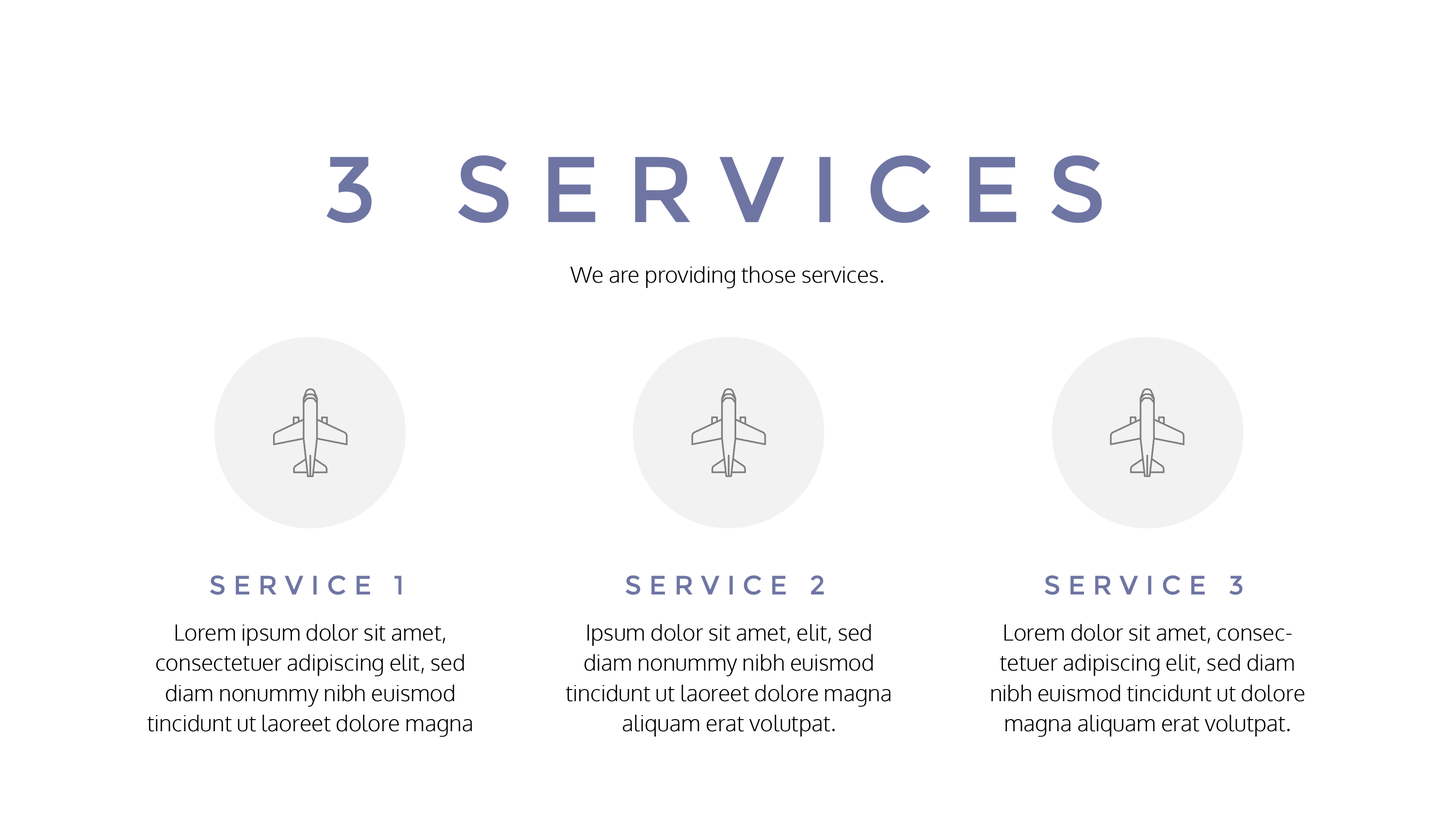
<style>
.page{position:relative;width:1455px;height:819px;background:#ffffff}
.page>*{position:absolute;margin:0}
.t1{font:93.2px "Montserrat-Regular";letter-spacing:0.28em;color:#6f75a3}
.t2{font:22.2px "Oxygen-Light";color:#000000}
.t3{font:26.7px "Montserrat-Regular";letter-spacing:0.28em;color:#6f75a3}
.t4{font:22.2px/30.3px "Oxygen-Light";color:#000000}
</style>
<div class="page">
<p class="t1" style="left:326px;top:155px;width:776px;height:68px">3 SERVICES</p>
<p class="t2" style="left:570px;top:266px;width:313px;height:23px">We are providing those services.</p>
<p class="t3" style="left:210px;top:575px;width:192px;height:20px">SERVICE 1</p>
<p class="t3" style="left:626px;top:575px;width:198px;height:20px">SERVICE 2</p>
<p class="t3" style="left:1045px;top:575px;width:198px;height:20px">SERVICE 3</p>
<p class="t4" style="left:147px;top:624px;width:325px;height:113px;text-align:center">Lorem ipsum dolor sit amet, consectetuer adipiscing elit, sed diam nonummy nibh euismod tincidunt ut laoreet dolore magna aliquam erat volutpat.</p>
<p class="t4" style="left:566px;top:624px;width:325px;height:113px;text-align:center">Ipsum dolor sit amet, elit, sed diam nonummy nibh euismod tincidunt ut laoreet dolore magna aliquam erat volutpat.</p>
<p class="t4" style="left:992px;top:624px;width:313px;height:113px;text-align:center">Lorem dolor sit amet, consectetuer adipiscing elit, sed diam nibh euismod tincidunt ut dolore magna aliquam erat volutpat.</p>
</div>
